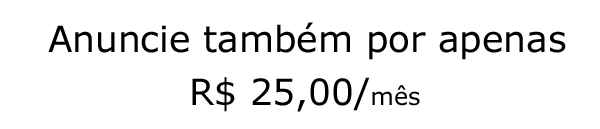
<style>
.page{position:relative;width:600px;height:129px;background:#ffffff}
.page>*{position:absolute;margin:0}
.t1{font:36px "Verdana";color:#000000}
.t2{font:24px "Verdana";color:#000000}
</style>
<div class="page">
<p class="t1" style="left:48px;top:22px;width:518px;height:38px">Anuncie também por apenas</p>
<p class="t1" style="left:192px;top:77px;width:228px;height:35px">R$ 25,00/<span class="t2">mês</span></p>
</div>
